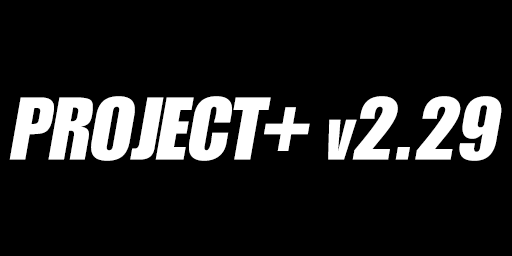
<style>
.page{position:relative;width:512px;height:256px;background:#000000}
.page>*{position:absolute;margin:0}
.t1{font:86.7px "GENUINE";color:#ffffff;font-style:italic}
.t2{font:68px "GENUINE";color:#ffffff;font-style:italic}
</style>
<div class="page">
<p class="t1" style="left:9px;top:96px;width:493px;height:65px">PROJECT   <span class="t2">v</span>2.29</p>
<p class="t1" style="left:264px;top:107px;width:46px;height:44px">+</p>
</div>
